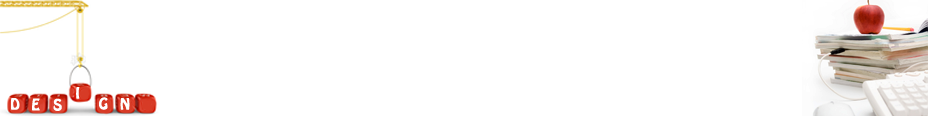
<style>
.page{position:relative;width:928px;height:116px;background:#ffffff}
.page>*{position:absolute;margin:0}
.t1{font:14px "HoboStd";letter-spacing:0.05em;color:#ffffff}
</style>
<div class="page">
<p class="t1" style="left:76px;top:87px;width:4px;height:12px">I</p>
<p class="t1" style="left:11px;top:98px;width:9px;height:12px">D</p>
<p class="t1" style="left:32px;top:98px;width:8px;height:13px">E</p>
<p class="t1" style="left:53px;top:98px;width:9px;height:13px">S</p>
<p class="t1" style="left:99px;top:97px;width:9px;height:13px">G</p>
<p class="t1" style="left:120px;top:98px;width:10px;height:12px">N</p>
</div>
